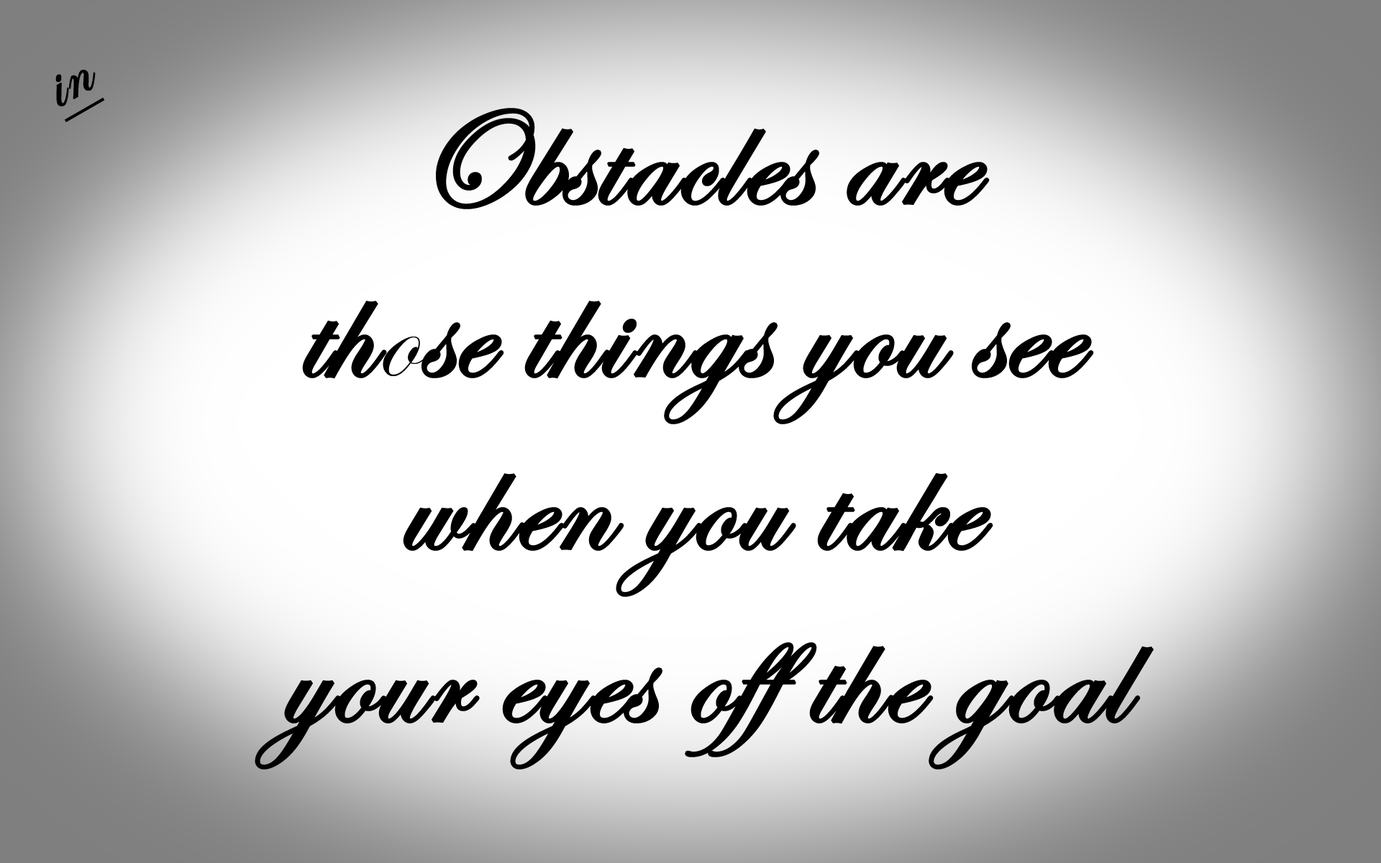
<style>
.page{position:relative;width:1381px;height:863px;background:#ffffff}
.page>*{position:absolute;margin:0}
.t1{font:71.9px "EdwardianScriptITC";color:#000000;font-weight:bold;text-decoration:underline}
.t2{font:143.9px "EdwardianScriptITC";color:#000000;font-weight:bold}
</style>
<div class="page">
<p class="t1" style="left:55px;top:70px;width:50px;height:52px;rotate:-30deg">in</p>
<p class="t2" style="left:255px;top:108px;width:899px;height:662px;text-align:center">Obstacles are <br>those things you see <br>when you take <br>your eyes off the goal</p>
</div>
